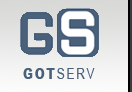
<style>
.page{position:relative;width:132px;height:92px}
.page>*{position:absolute;margin:0}
.t1{font:15px "ArialMT";letter-spacing:0.15em;color:#4a617b;scale:0.8 1}
.t2{font:15px "Arial-Black";letter-spacing:0.15em;color:#4a617b;scale:0.8 1}
</style>
<div class="page">
<p class="t1" style="left:23px;top:68px;width:72px;height:11px"><span class="t2">GOT</span>SERV</p>
</div>
